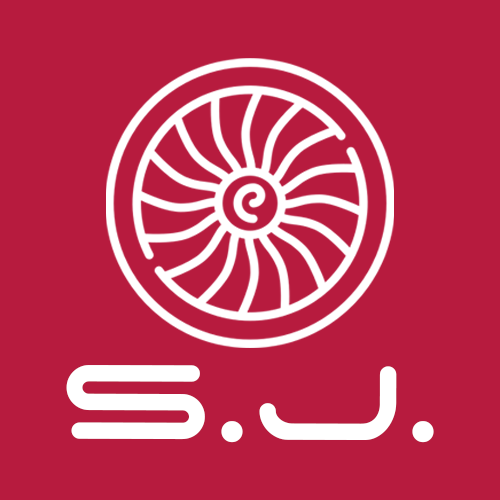
<style>
.page{position:relative;width:500px;height:500px;background:#b71b3e}
.page>*{position:absolute;margin:0}
.t1{font:168.9px "SpaceAge";color:#ffffff}
</style>
<div class="page">
<p class="t1" style="left:66px;top:365px;width:368px;height:78px">S.J.</p>
</div>
